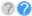
<style>
.page{position:relative;width:32px;height:16px}
.page>*{position:absolute;margin:0}
.t1{font:15.3px "ArialMT";color:#999999;scale:1.11 1}
.t2{font:15.3px "ArialMT";color:#ffffff;scale:1.11 1}
</style>
<div class="page">
<p class="t1" style="left:4px;top:3px;width:9px;height:11px">?</p>
<p class="t2" style="left:20px;top:3px;width:9px;height:11px">?</p>
</div>
